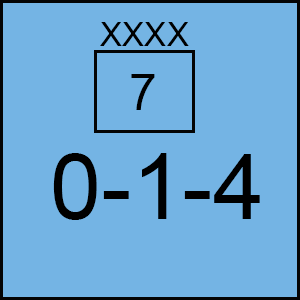
<style>
.page{position:relative;width:300px;height:300px;background:#74b4e4}
.page>*{position:absolute;margin:0}
.t1{font:33.3px "ArialMT";color:#000000}
.t2{font:50px "ArialMT";color:#000000}
.t3{font:91.7px "ArialMT";color:#000000}
</style>
<div class="page">
<p class="t1" style="left:100px;top:22px;width:89px;height:24px">XXXX</p>
<p class="t2" style="left:131px;top:74px;width:24px;height:36px">7</p>
<p class="t3" style="left:53px;top:153px;width:207px;height:67px">0-1-4</p>
</div>
